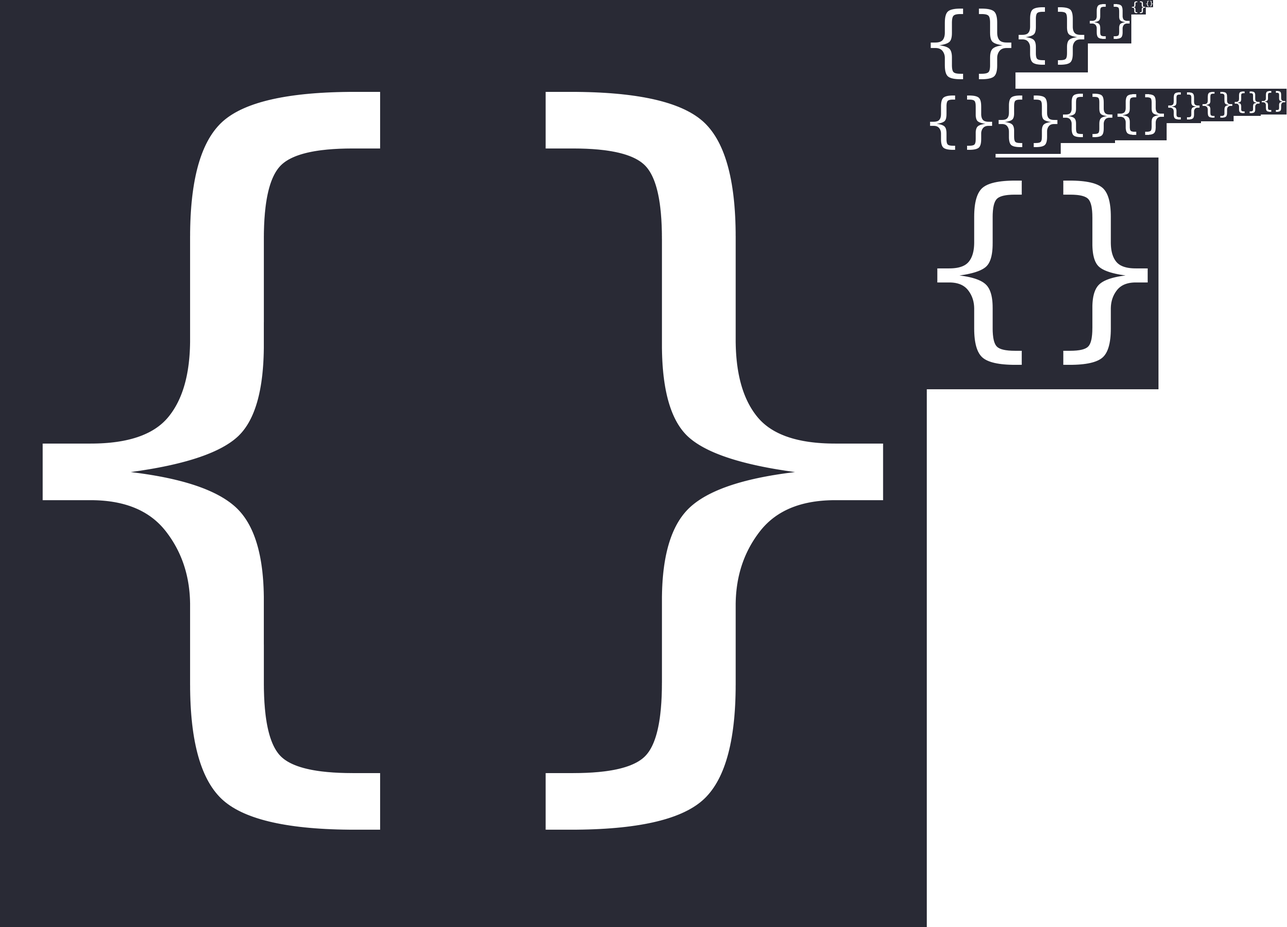
<style>
.page{position:relative;width:1287px;height:927px;background:#292a35}
.page>*{position:absolute;margin:0}
.t1{font:37.8px "Menlo-Regular";color:#ffffff}
.t2{font:12.6px "Menlo-Regular";color:#ffffff}
.t3{font:6.3px "Menlo-Regular";color:#ffffff}
.t4{font:77.2px "Menlo-Regular";color:#ffffff}
.t5{font:63.1px "Menlo-Regular";color:#ffffff}
.t6{font:807.1px "Menlo-Regular";color:#ffffff}
.t7{font:59.9px "Menlo-Regular";color:#ffffff}
.t8{font:56.7px "Menlo-Regular";color:#ffffff}
.t9{font:47.3px "Menlo-Regular";color:#ffffff}
.t10{font:44.9px "Menlo-Regular";color:#ffffff}
.t11{font:30px "Menlo-Regular";color:#ffffff}
.t12{font:28.4px "Menlo-Regular";color:#ffffff}
.t13{font:23.6px "Menlo-Regular";color:#ffffff}
.t14{font:22.5px "Menlo-Regular";color:#ffffff}
.t15{font:201.8px "Menlo-Regular";color:#ffffff}
</style>
<div class="page">
<p class="t1" style="left:1090px;top:4px;width:40px;height:35px">{}</p>
<p class="t2" style="left:1132px;top:1px;width:13px;height:12px">{}</p>
<p class="t3" style="left:1146px;top:1px;width:7px;height:5px">{}</p>
<p class="t4" style="left:930px;top:9px;width:81px;height:70px">{}</p>
<p class="t5" style="left:1018px;top:7px;width:66px;height:58px">{}</p>
<p class="t6" style="left:43px;top:92px;width:840px;height:737px">{}</p>
<p class="t7" style="left:930px;top:95px;width:62px;height:55px">{}</p>
<p class="t8" style="left:998px;top:95px;width:59px;height:52px">{}</p>
<p class="t9" style="left:1063px;top:94px;width:50px;height:43px">{}</p>
<p class="t10" style="left:1117px;top:94px;width:47px;height:41px">{}</p>
<p class="t11" style="left:1168px;top:92px;width:31px;height:27px">{}</p>
<p class="t12" style="left:1202px;top:92px;width:31px;height:26px">{}</p>
<p class="t13" style="left:1234px;top:91px;width:26px;height:22px">{}</p>
<p class="t14" style="left:1261px;top:91px;width:24px;height:21px">{}</p>
<p class="t15" style="left:937px;top:181px;width:211px;height:184px">{}</p>
</div>
